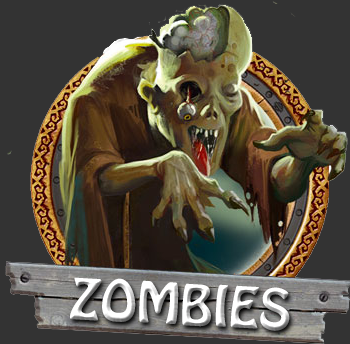
<style>
.page{position:relative;width:350px;height:344px;background:#333333}
.page>*{position:absolute;margin:0}
.t1{font:50px "HoboStd"}
</style>
<div class="page">
<p class="t1" style="left:70px;top:277px;width:220px;height:54px;rotate:3deg">ZOMBIES</p>
</div>
